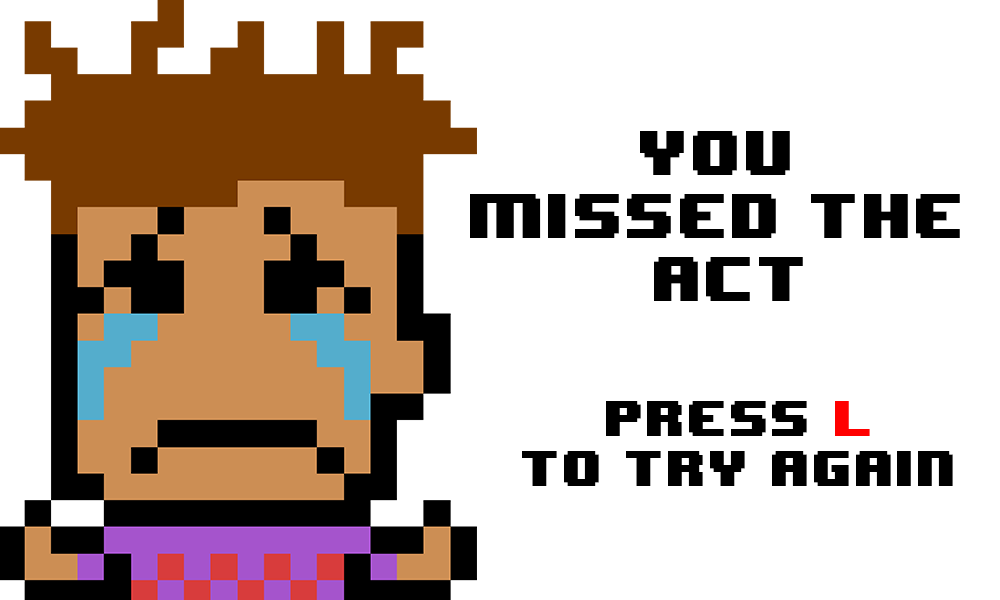
<style>
.page{position:relative;width:1000px;height:600px;background:#ffffff}
.page>*{position:absolute;margin:0}
.t1{font:52.6px "8BITWONDERNominal";color:#000000}
.t2{font:41.7px "8BITWONDERNominal";color:#000000}
.t3{font:41.7px "8BITWONDERNominal";color:#ff0000}
</style>
<div class="page">
<p class="t1" style="left:470px;top:131px;width:490px;height:170px;text-align:center">you <br>missed the <br>act</p>
<p class="t2" style="left:522px;top:401px;width:431px;height:85px;text-align:center">PRESS <span class="t3">L<br></span>TO TRY AGAIN</p>
</div>
